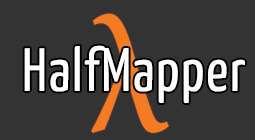
<style>
.page{position:relative;width:255px;height:140px;background:#333333}
.page>*{position:absolute;margin:0}
.t1{font:164px "MinionPro-Regular";color:#f37b21}
.t2{font:61.3px "YanoneKaffeesatz-Regular";letter-spacing:0.025em;color:#ffffff}
</style>
<div class="page">
<p class="t1" style="left:91px;top:13px;width:78px;height:120px">λ</p>
<p class="t2" style="left:24px;top:45px;width:222px;height:58px">HalfMapper</p>
</div>
